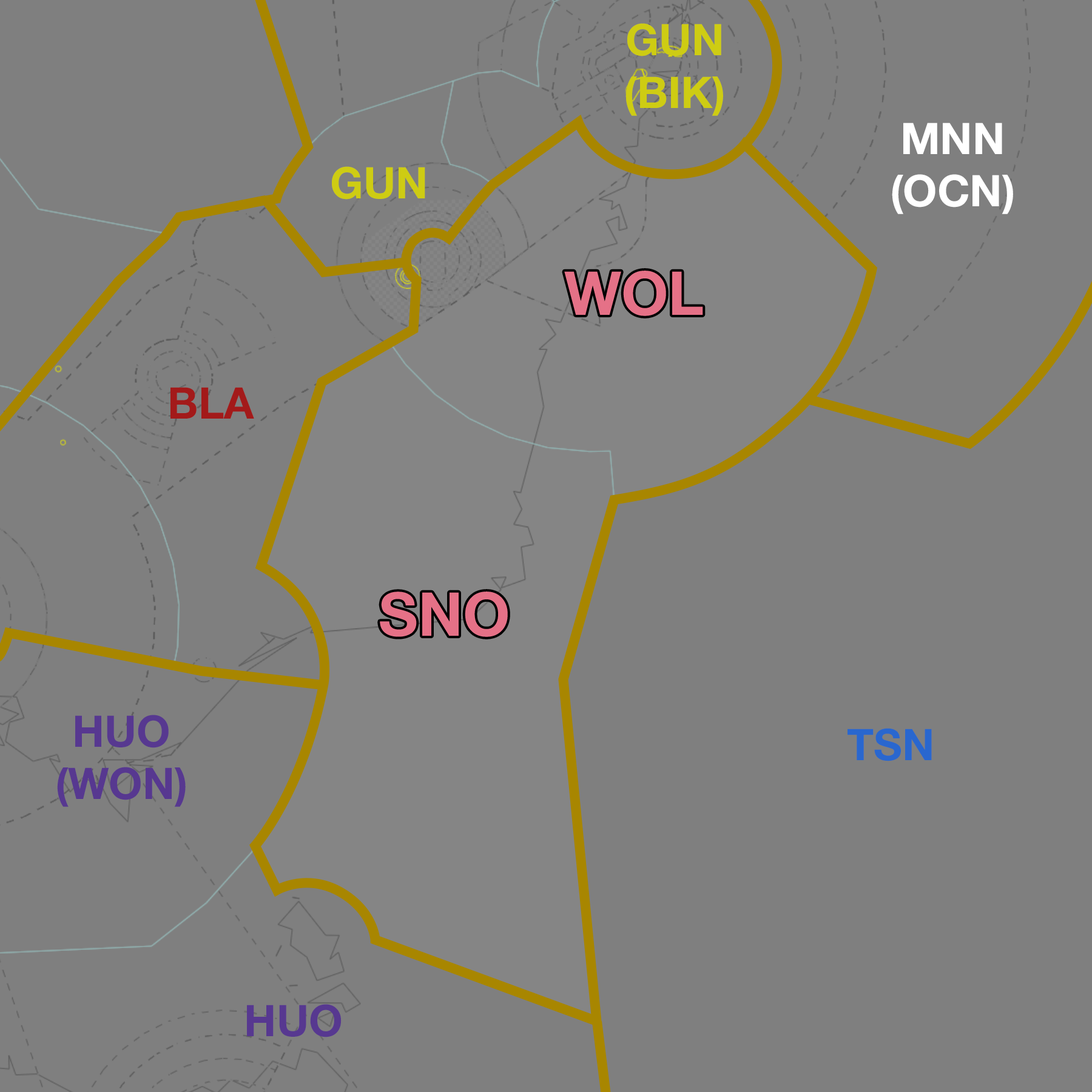
<style>
.page{position:relative;width:1092px;height:1092px;background:#7f7f7f}
.page>*{position:absolute;margin:0}
.t1{font:43.7px "HelveticaNeue-Bold";color:#cecc13}
.t2{font:43.7px "HelveticaNeue-Bold";color:#ffffff}
.t3{font:60.7px "HelveticaNeue-Bold";color:#e57187}
.t4{font:43.7px "HelveticaNeue-Bold";color:#a31a1a}
.t5{font:43.7px "HelveticaNeue-Bold";color:#573890}
.t6{font:43.7px "HelveticaNeue-Bold";color:#2967cf}
</style>
<div class="page">
<p class="t1" style="left:625px;top:23px;width:98px;height:93px;text-align:center">GUN<br>(BIK)</p>
<p class="t2" style="left:892px;top:123px;width:121px;height:91px;text-align:center">MNN<br>(OCN)</p>
<p class="t1" style="left:332px;top:166px;width:93px;height:34px">GUN</p>
<p class="t3" style="left:564px;top:271px;width:139px;height:45px">WOL</p>
<p class="t4" style="left:170px;top:387px;width:84px;height:32px">BLA</p>
<p class="t3" style="left:380px;top:591px;width:128px;height:46px">SNO</p>
<p class="t5" style="left:57px;top:715px;width:129px;height:92px;text-align:center">HUO<br>(WON)</p>
<p class="t6" style="left:848px;top:728px;width:84px;height:33px">TSN</p>
<p class="t5" style="left:247px;top:1004px;width:95px;height:33px">HUO</p>
</div>
